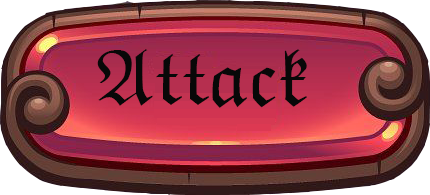
<style>
.page{position:relative;width:430px;height:195px}
.page>*{position:absolute;margin:0}
.t1{font:80px "EuclidFraktur";color:#080808}
</style>
<div class="page">
<p class="t1" style="left:97px;top:49px;width:210px;height:59px">Attack</p>
</div>
